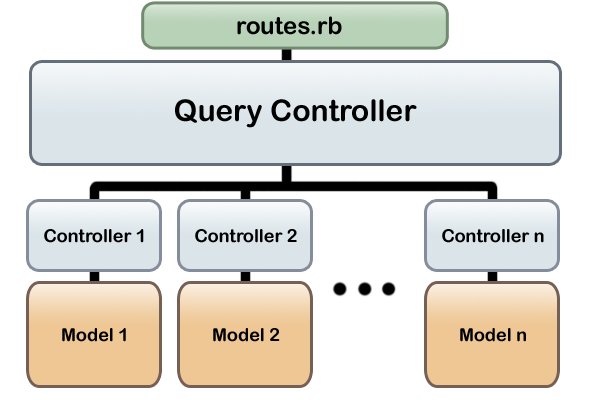
<style>
.page{position:relative;width:600px;height:400px;background:#ffffff}
.page>*{position:absolute;margin:0}
.t1{font:24px "ArialRoundedMTBold";color:#000000}
.t2{font:30px "ArialRoundedMTBold";color:#000000}
.t3{font:18px "ArialRoundedMTBold";color:#000000}
</style>
<div class="page">
<p class="t1" style="left:237px;top:16px;width:105px;height:19px">routes.rb</p>
<p class="t2" style="left:175px;top:99px;width:242px;height:29px">Query Controller</p>
<p class="t3" style="left:44px;top:229px;width:100px;height:14px">Controller 1</p>
<p class="t3" style="left:195px;top:229px;width:102px;height:14px">Controller 2</p>
<p class="t3" style="left:442px;top:229px;width:102px;height:14px">Controller n</p>
<p class="t3" style="left:62px;top:328px;width:64px;height:14px">Model 1</p>
<p class="t3" style="left:213px;top:328px;width:67px;height:14px">Model 2</p>
<p class="t3" style="left:460px;top:328px;width:66px;height:14px">Model n</p>
</div>
